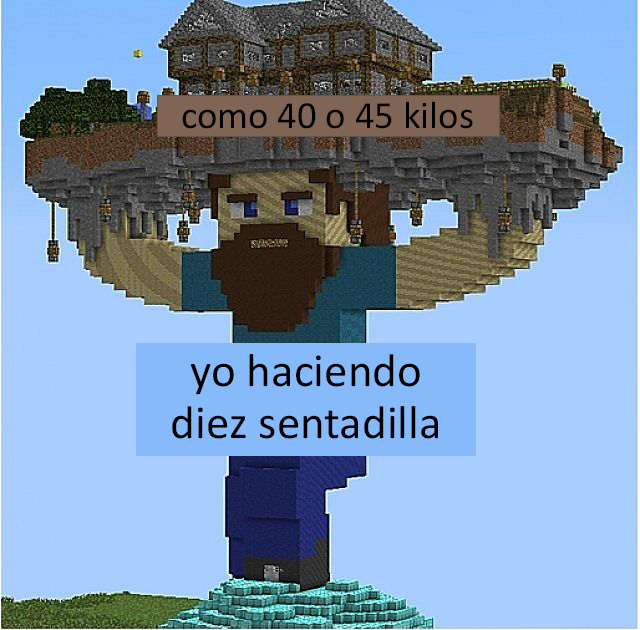
<style>
.page{position:relative;width:640px;height:630px;background:#a8ceff}
.page>*{position:absolute;margin:0}
.t1{font:38.7px "Calibri";color:#000000}
.t2{font:46.9px "Calibri";color:#000000}
</style>
<div class="page">
<p class="t1" style="left:182px;top:101px;width:291px;height:28px">como 40 o 45 kilos</p>
<p class="t2" style="left:172px;top:354px;width:266px;height:85px;text-align:center">yo haciendo<br>diez sentadilla</p>
</div>
